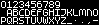
<style>
.page{position:relative;width:99px;height:25px;background:#000000}
.page>*{position:absolute;margin:0}
.t1{font:16px "m5x7";color:#ffffff}
</style>
<div class="page">
<p class="t1" style="left:1px;top:1px;width:59px;height:7px">0123456789</p>
<p class="t1" style="left:1px;top:17px;width:41px;height:7px">PQRSTUV</p>
<p class="t1" style="left:7px;top:9px;width:91px;height:7px">ABCDEFGHIJKLMNO</p>
<p class="t1" style="left:49px;top:17px;width:23px;height:7px">XYZ_</p>
<p class="t1" style="left:88px;top:22px;width:2px;height:2px">,</p>
</div>
